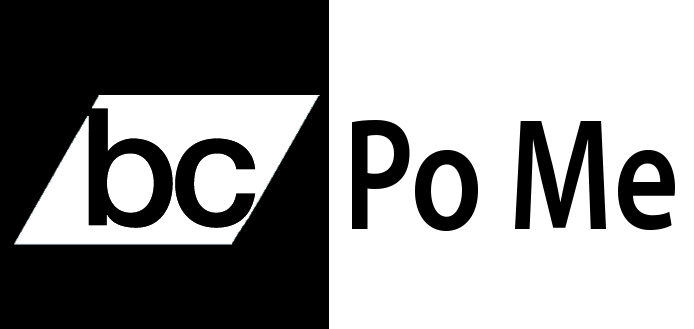
<style>
.page{position:relative;width:694px;height:329px;background:#ffffff}
.page>*{position:absolute;margin:0}
.t1{font:160px "MyriadPro-Semibold";color:#000000;scale:0.79 1}
</style>
<div class="page">
<p class="t1" style="left:352px;top:120px;width:323px;height:111px">Po Me</p>
</div>
